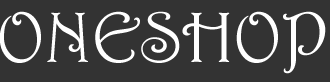
<style>
.page{position:relative;width:330px;height:82px;background:#333333}
.page>*{position:absolute;margin:0}
.t1{font:72px "Harrington";color:#ffffff}
</style>
<div class="page">
<p class="t1" style="left:0px;top:11px;width:326px;height:63px">ONESHOP</p>
</div>
